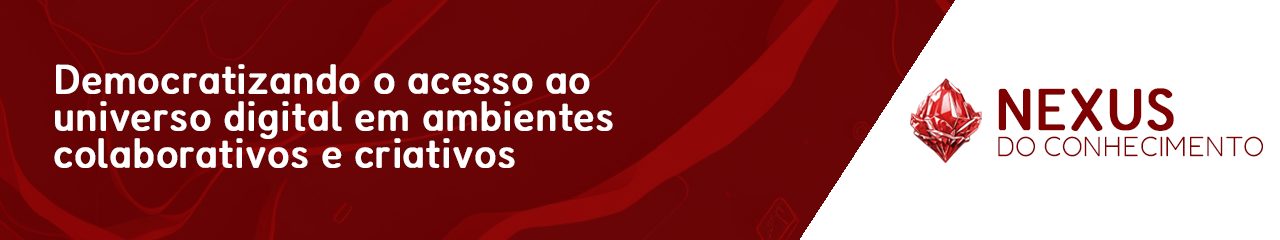
<style>
.page{position:relative;width:1280px;height:240px;background:#ffffff}
.page>*{position:absolute;margin:0}
.t1{font:41.2px/36.9px "FredokaSemiCondensed-Regular";color:#ffffff;font-weight:bold;scale:1.1 1}
.t2{font:58.5px "FredokaSemiCondensed-Regular";color:#7f0000;font-weight:bold;scale:1.06 1}
.t3{font:28.1px "Fredoka-Light";color:#7f0000}
</style>
<div class="page">
<p class="t1" style="left:54px;top:64px;width:559px;height:104px">Democratizando o acesso ao<br>universo digital em ambientes <br>colaborativos e criativos</p>
<p class="t2" style="left:998px;top:88px;width:176px;height:43px">NEXUS</p>
<p class="t3" style="left:998px;top:136px;width:265px;height:21px">DO CONHECIMENTO</p>
</div>
